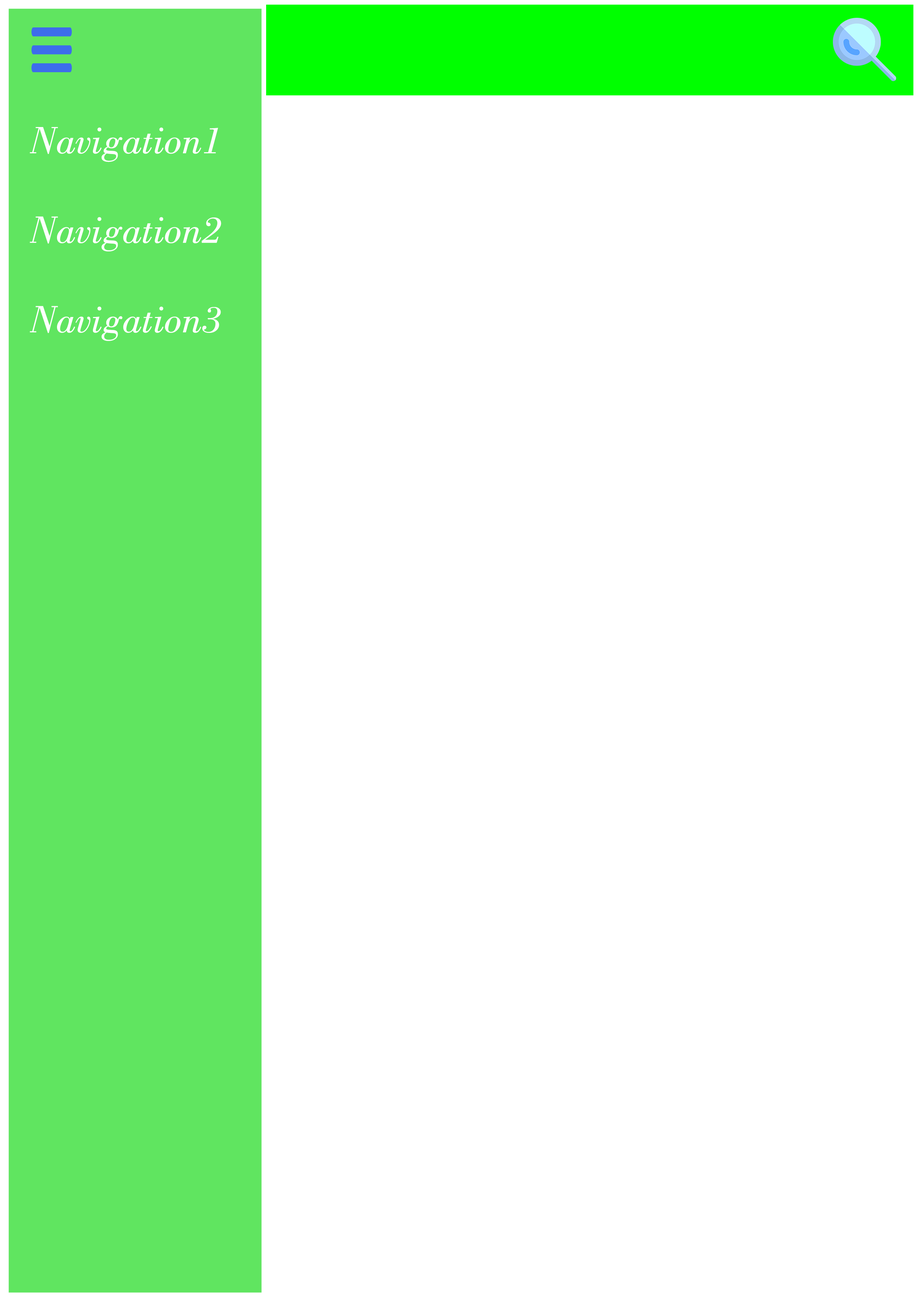
<style>
.page{position:relative;width:918px;height:1299px;background:#ffffff}
.page>*{position:absolute;margin:0}
.t1{font:40.1px "BodoniBT-BookItalic";color:#fefefe}
</style>
<div class="page">
<p class="t1" style="left:30px;top:127px;width:188px;height:35px">Navigation1</p>
<p class="t1" style="left:30px;top:216px;width:191px;height:35px">Navigation2</p>
<p class="t1" style="left:30px;top:306px;width:191px;height:35px">Navigation3</p>
</div>
